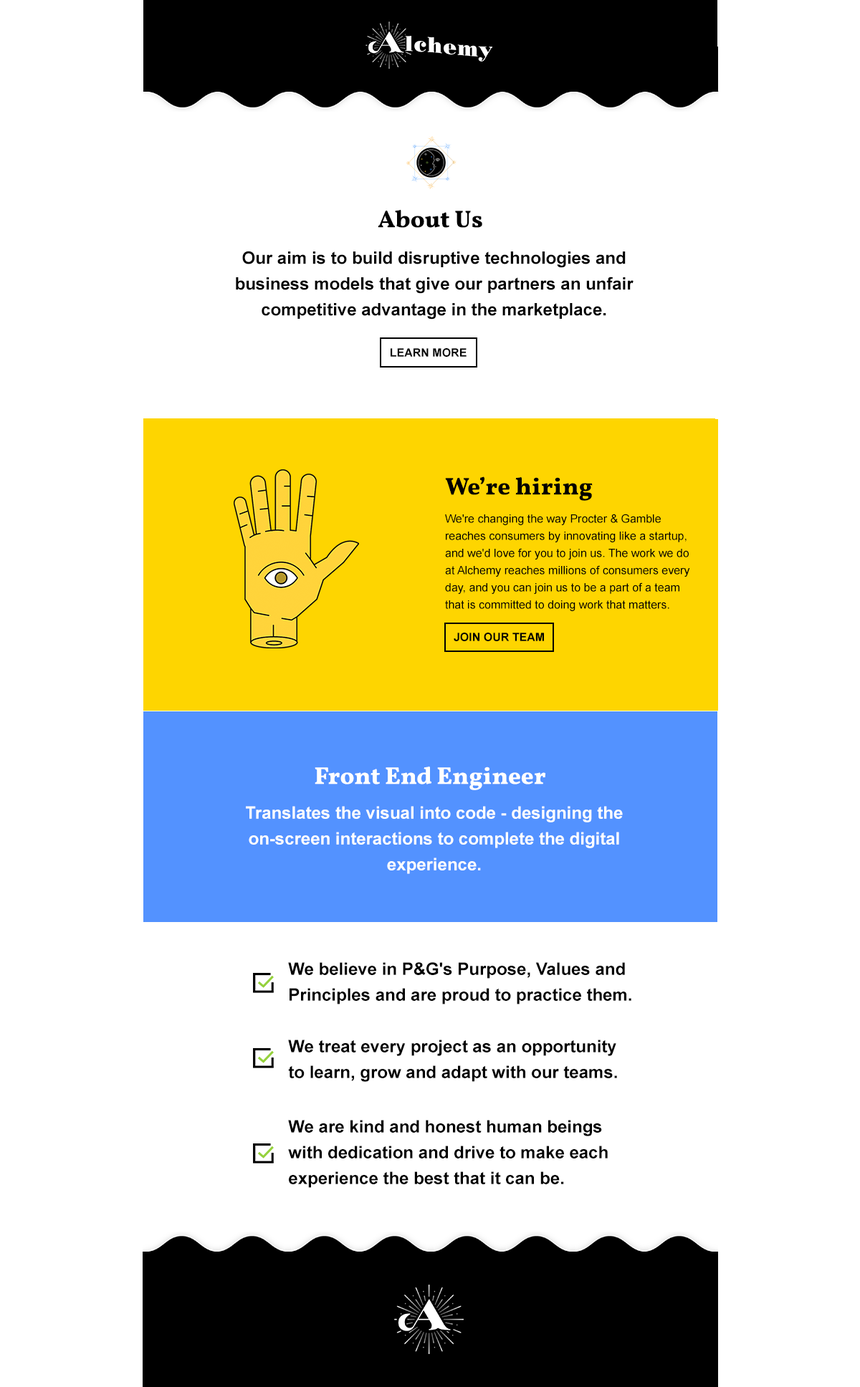
<style>
.page{position:relative;width:860px;height:1387px;background:#ffffff}
.page>*{position:absolute;margin:0}
.t1{font:24.4px "Vollkorn-ExtraBold";color:#000000}
.t2{font:17.2px/25.8px "Arial-BoldMT";color:#000000}
.t3{font:11.5px "Arial-BoldMT";color:#000000}
.t4{font:11.5px/17.2px "ArialMT";color:#000000}
.t5{font:24.4px "Vollkorn-ExtraBold";color:#ffffff}
.t6{font:17.2px/25.8px "Arial-BoldMT";color:#fefefe}
</style>
<div class="page">
<p class="t1" style="left:378px;top:209px;width:104px;height:19px">About Us</p>
<p class="t2" style="left:236px;top:251px;width:397px;height:69px;text-align:center">Our aim is to build disruptive technologies and<br>business models that give our partners an unfair<br>competitive advantage in the marketplace.</p>
<p class="t3" style="left:390px;top:348px;width:76px;height:9px">LEARN MORE</p>
<p class="t1" style="left:445px;top:476px;width:147px;height:25px">We’re hiring</p>
<p class="t4" style="left:445px;top:514px;width:245px;height:97px">We're changing the way Procter &amp; Gamble reaches consumers by innovating like a startup, and we'd love for you to join us. The work we do at Alchemy reaches millions of consumers every day, and you can join us to be a part of a team that is committed to doing work that matters.</p>
<p class="t3" style="left:454px;top:633px;width:90px;height:8px">JOIN OUR TEAM</p>
<p class="t5" style="left:315px;top:766px;width:231px;height:24px">Front End Engineer</p>
<p class="t6" style="left:246px;top:806px;width:377px;height:68px;text-align:center">Translates the visual into code - designing the on-screen interactions to complete the digital experience.</p>
<p class="t2" style="left:288px;top:962px;width:343px;height:42px">We believe in P&amp;G's Purpose, Values and Principles and are proud to practice them.</p>
<p class="t2" style="left:288px;top:1040px;width:329px;height:42px">We treat every project as an opportunity to learn, grow and adapt with our teams.</p>
<p class="t2" style="left:288px;top:1120px;width:320px;height:68px">We are kind and honest human beings with dedication and drive to make each experience the best that it can be.</p>
</div>
